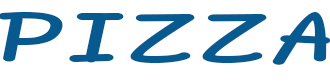
<style>
.page{position:relative;width:330px;height:83px;background:#ffffff}
.page>*{position:absolute;margin:0}
.t1{font:100px "FontNongnam-Bold";color:#065a8f;scale:1.77 1}
</style>
<div class="page">
<p class="t1" style="left:0px;top:12px;width:331px;height:53px">PIZZA</p>
</div>
